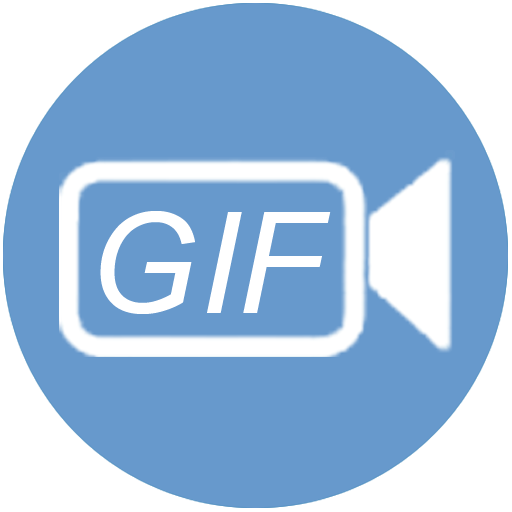
<style>
.page{position:relative;width:512px;height:512px;background:#6799cc}
.page>*{position:absolute;margin:0}
.t1{font:141.4px "Arial-ItalicMT";color:#ffffff}
</style>
<div class="page">
<p class="t1" style="left:100px;top:211px;width:231px;height:103px">GIF</p>
</div>
